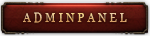
<style>
.page{position:relative;width:150px;height:36px}
.page>*{position:absolute;margin:0}
.t1{font:11.5px "Georgia";letter-spacing:0.25em;text-transform:uppercase}
</style>
<div class="page">
<p class="t1" style="left:23px;top:13px;width:104px;height:11px">AdminPanel</p>
<p class="t1" style="left:23px;top:12px;width:104px;height:11px">AdminPanel</p>
<p class="t1" style="left:23px;top:12px;width:104px;height:11px">AdminPanel</p>
<p class="t1" style="left:23px;top:12px;width:104px;height:11px">AdminPAnel</p>
</div>
